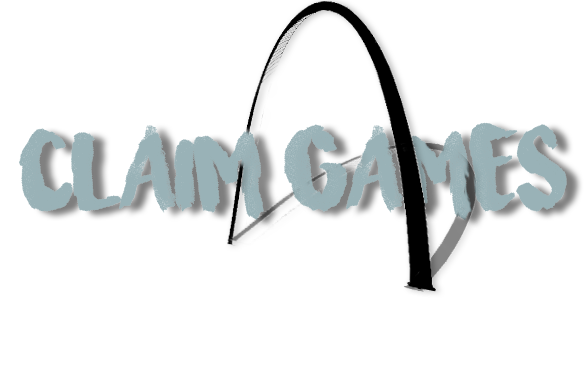
<style>
.page{position:relative;width:588px;height:369px;background:#ffffff}
.page>*{position:absolute;margin:0}
.t1{font:90px "SurfingCapital";color:#99b2b7}
</style>
<div class="page">
<p class="t1" style="left:19px;top:122px;width:548px;height:99px">Claim Games</p>
</div>
